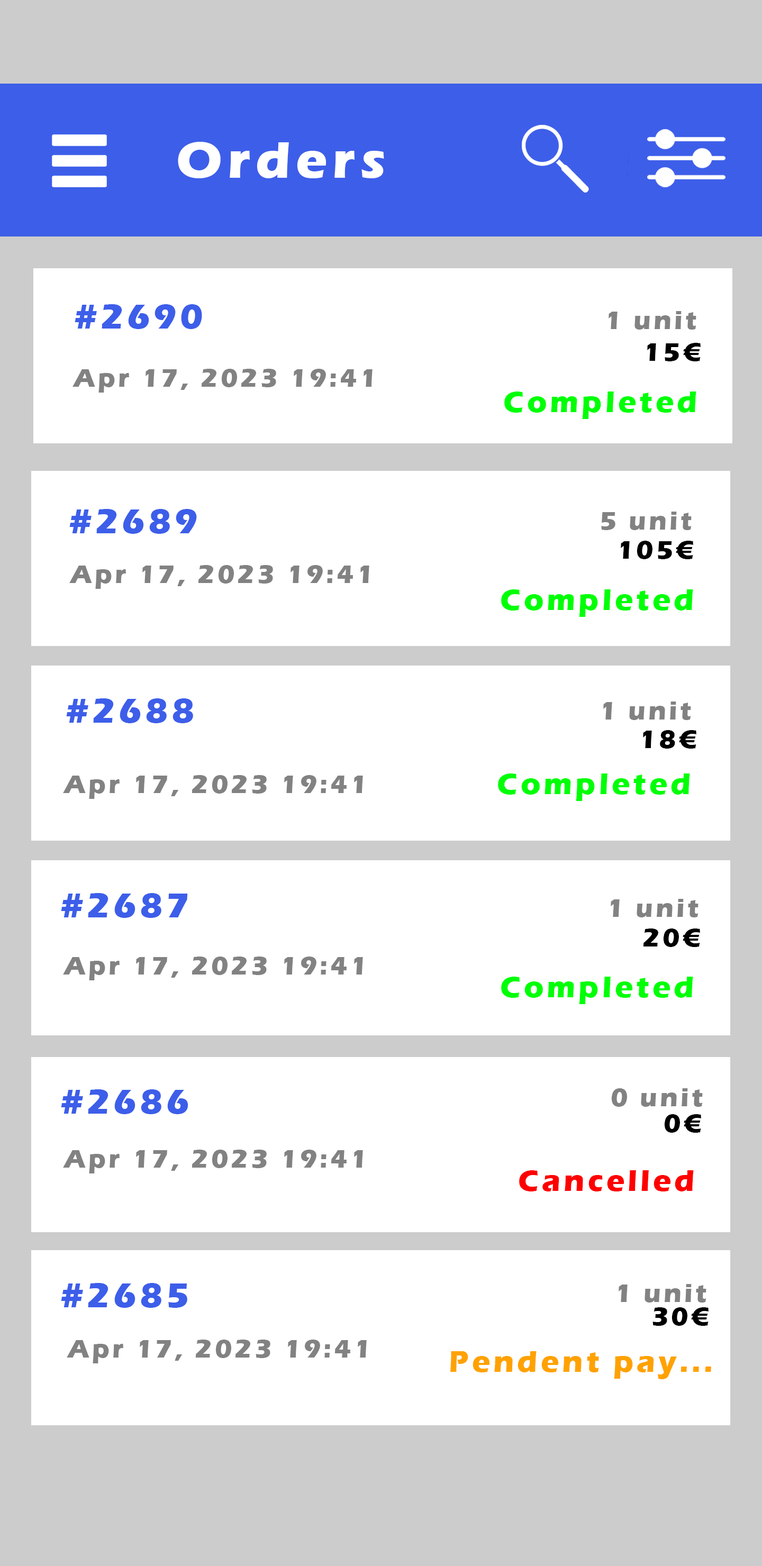
<style>
.page{position:relative;width:762px;height:1566px;background:#ffffff}
.page>*{position:absolute;margin:0}
.t1{font:52.9px "ErasITC-Bold";letter-spacing:0.1em;color:#ffffff}
.t2{font:35.3px "ErasITC-Bold";letter-spacing:0.1em;color:#3d5ee9}
.t3{font:26.4px "ErasITC-Bold";letter-spacing:0.1em;color:#828282}
.t4{font:26.4px "ErasITC-Bold";letter-spacing:0.1em;color:#000000}
.t5{font:30.9px "ErasITC-Bold";letter-spacing:0.1em;color:#00ff06}
.t6{font:30.9px "ErasITC-Bold";letter-spacing:0.1em;color:#ff0000}
.t7{font:30.9px "ErasITC-Bold";letter-spacing:0.1em;color:#ffa200}
</style>
<div class="page">
<p class="t1" style="left:178px;top:142px;width:206px;height:36px">Orders</p>
<p class="t2" style="left:75px;top:304px;width:127px;height:25px">#2690</p>
<p class="t3" style="left:608px;top:311px;width:88px;height:19px">1 unit</p>
<p class="t4" style="left:647px;top:343px;width:53px;height:18px">15€</p>
<p class="t3" style="left:72px;top:369px;width:300px;height:23px">Apr 17, 2023 19:41</p>
<p class="t5" style="left:504px;top:391px;width:192px;height:28px">Completed</p>
<p class="t2" style="left:69px;top:509px;width:128px;height:25px">#2689</p>
<p class="t3" style="left:601px;top:511px;width:90px;height:19px">5 unit</p>
<p class="t4" style="left:620px;top:541px;width:73px;height:18px">105€</p>
<p class="t3" style="left:69px;top:565px;width:300px;height:24px">Apr 17, 2023 19:41</p>
<p class="t5" style="left:501px;top:589px;width:192px;height:28px">Completed</p>
<p class="t2" style="left:66px;top:698px;width:127px;height:25px">#2688</p>
<p class="t3" style="left:603px;top:701px;width:88px;height:19px">1 unit</p>
<p class="t4" style="left:643px;top:730px;width:53px;height:18px">18€</p>
<p class="t5" style="left:498px;top:773px;width:192px;height:28px">Completed</p>
<p class="t3" style="left:63px;top:775px;width:300px;height:24px">Apr 17, 2023 19:41</p>
<p class="t2" style="left:61px;top:893px;width:127px;height:25px">#2687</p>
<p class="t3" style="left:610px;top:899px;width:88px;height:18px">1 unit</p>
<p class="t4" style="left:643px;top:928px;width:57px;height:19px">20€</p>
<p class="t3" style="left:63px;top:956px;width:300px;height:24px">Apr 17, 2023 19:41</p>
<p class="t5" style="left:501px;top:976px;width:192px;height:28px">Completed</p>
<p class="t2" style="left:61px;top:1089px;width:127px;height:25px">#2686</p>
<p class="t3" style="left:611px;top:1088px;width:91px;height:19px">0 unit</p>
<p class="t4" style="left:664px;top:1114px;width:37px;height:18px">0€</p>
<p class="t3" style="left:63px;top:1149px;width:300px;height:24px">Apr 17, 2023 19:41</p>
<p class="t6" style="left:519px;top:1170px;width:174px;height:21px">Cancelled</p>
<p class="t2" style="left:61px;top:1283px;width:126px;height:24px">#2685</p>
<p class="t3" style="left:618px;top:1284px;width:88px;height:18px">1 unit</p>
<p class="t4" style="left:652px;top:1307px;width:56px;height:18px">30€</p>
<p class="t3" style="left:67px;top:1339px;width:300px;height:24px">Apr 17, 2023 19:41</p>
<p class="t7" style="left:450px;top:1351px;width:261px;height:28px">Pendent pay...</p>
</div>
